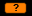
<style>
.page{position:relative;width:32px;height:16px;background:#000000}
.page>*{position:absolute;margin:0}
.t1{font:10px "Arial-BoldMT";letter-spacing:0.1em;color:#000000}
</style>
<div class="page">
<p class="t1" style="left:13px;top:4px;width:6px;height:7px">?</p>
</div>
